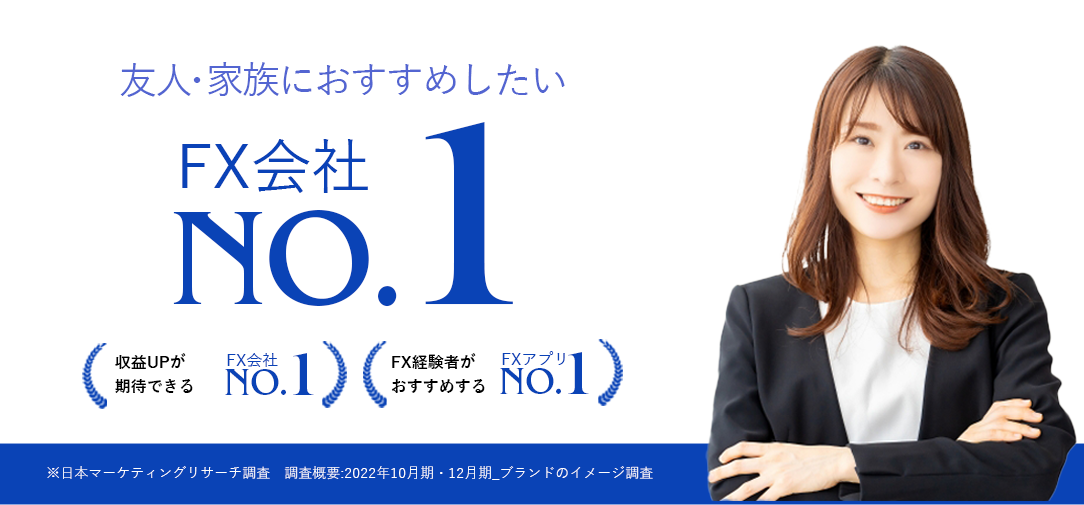
<style>
.page{position:relative;width:1084px;height:505px;background:#ffffff}
.page>*{position:absolute;margin:0}
.t1{font:38px "YuGothic-Medium";letter-spacing:-0.05em;color:#5365d1}
.t2{font:140px "BenguiatProITC-Book";color:#0a43b6}
.t3{font:267.7px "BenguiatProITC-Book";color:#0a43b6}
.t4{font:60px "YuGothic-Medium";color:#0a42b7}
.t5{font:16px/24px "YuGothic-Bold";color:#000000}
.t6{font:37.7px "BenguiatProITC-Book";color:#0a43b6}
.t7{font:62.8px "BenguiatProITC-Book";color:#0a43b6}
.t8{font:16px "YuGothic-Medium";color:#0a42b7}
.t9{font:14px "YuGothic-Regular";color:#ffffff}
</style>
<div class="page">
<p class="t1" style="left:120px;top:62px;width:445px;height:35px">友人・家族におすすめしたい</p>
<p class="t2" style="left:173px;top:122px;width:340px;height:185px">NO.<span class="t3">1</span></p>
<p class="t4" style="left:182px;top:139px;width:186px;height:54px">FX会社</p>
<p class="t5" style="left:115px;top:353px;width:78px;height:40px">収益UPが<br>期待できる</p>
<p class="t6" style="left:225px;top:353px;width:89px;height:42px">NO.<span class="t7">1</span></p>
<p class="t8" style="left:227px;top:353px;width:51px;height:14px">FX会社</p>
<p class="t5" style="left:391px;top:353px;width:94px;height:40px">FX経験者が<br>おすすめする</p>
<p class="t6" style="left:500px;top:352px;width:89px;height:42px">NO.<span class="t7">1</span></p>
<p class="t8" style="left:502px;top:351px;width:63px;height:14px">FXアプリ</p>
<p class="t9" style="left:47px;top:466px;width:606px;height:14px">※日本マーケティングリサーチ調査　調査概要:2022年10月期・12月期_ブランドのイメージ調査</p>
</div>
